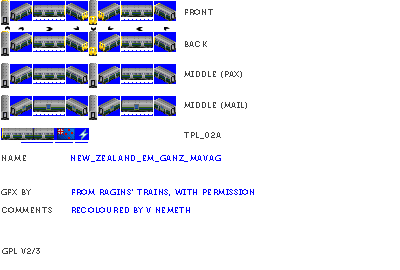
<style>
.page{position:relative;width:400px;height:270px;background:#ffffff}
.page>*{position:absolute;margin:0}
.t1{font:8px "Museo700-Regular";letter-spacing:0.075em;color:#404040;text-transform:uppercase}
.t2{font:8px "Museo700-Regular";letter-spacing:0.075em;color:#0000ff;text-transform:uppercase}
</style>
<div class="page">
<p class="t1" style="left:185px;top:9px;width:28px;height:6px">front</p>
<p class="t1" style="left:185px;top:41px;width:22px;height:6px">back</p>
<p class="t1" style="left:184px;top:71px;width:58px;height:7px">middle (pax)</p>
<p class="t1" style="left:184px;top:102px;width:63px;height:7px">middle (mail)</p>
<p class="t1" style="left:184px;top:132px;width:37px;height:7px">tpl_02a</p>
<p class="t1" style="left:2px;top:155px;width:24px;height:6px">name</p>
<p class="t2" style="left:71px;top:155px;width:150px;height:7px">New_Zealand_EM_Ganz_Mavag</p>
<p class="t1" style="left:1px;top:189px;width:30px;height:6px">gfx by</p>
<p class="t2" style="left:72px;top:189px;width:182px;height:7px">from ragins' trains, with permission</p>
<p class="t1" style="left:2px;top:207px;width:50px;height:6px">comments</p>
<p class="t2" style="left:72px;top:207px;width:118px;height:6px">recoloured by v nemeth</p>
<p class="t1" style="left:2px;top:248px;width:38px;height:6px">gpl v2/3</p>
</div>
